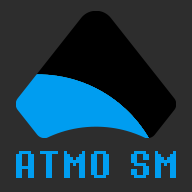
<style>
.page{position:relative;width:192px;height:192px;background:#2d2d2d}
.page>*{position:absolute;margin:0}
.t1{font:36px "BIG-SHOT";color:#009df0}
</style>
<div class="page">
<p class="t1" style="left:16px;top:151px;width:93px;height:27px">ATMO</p>
<p class="t1" style="left:131px;top:151px;width:45px;height:27px">SM</p>
</div>
